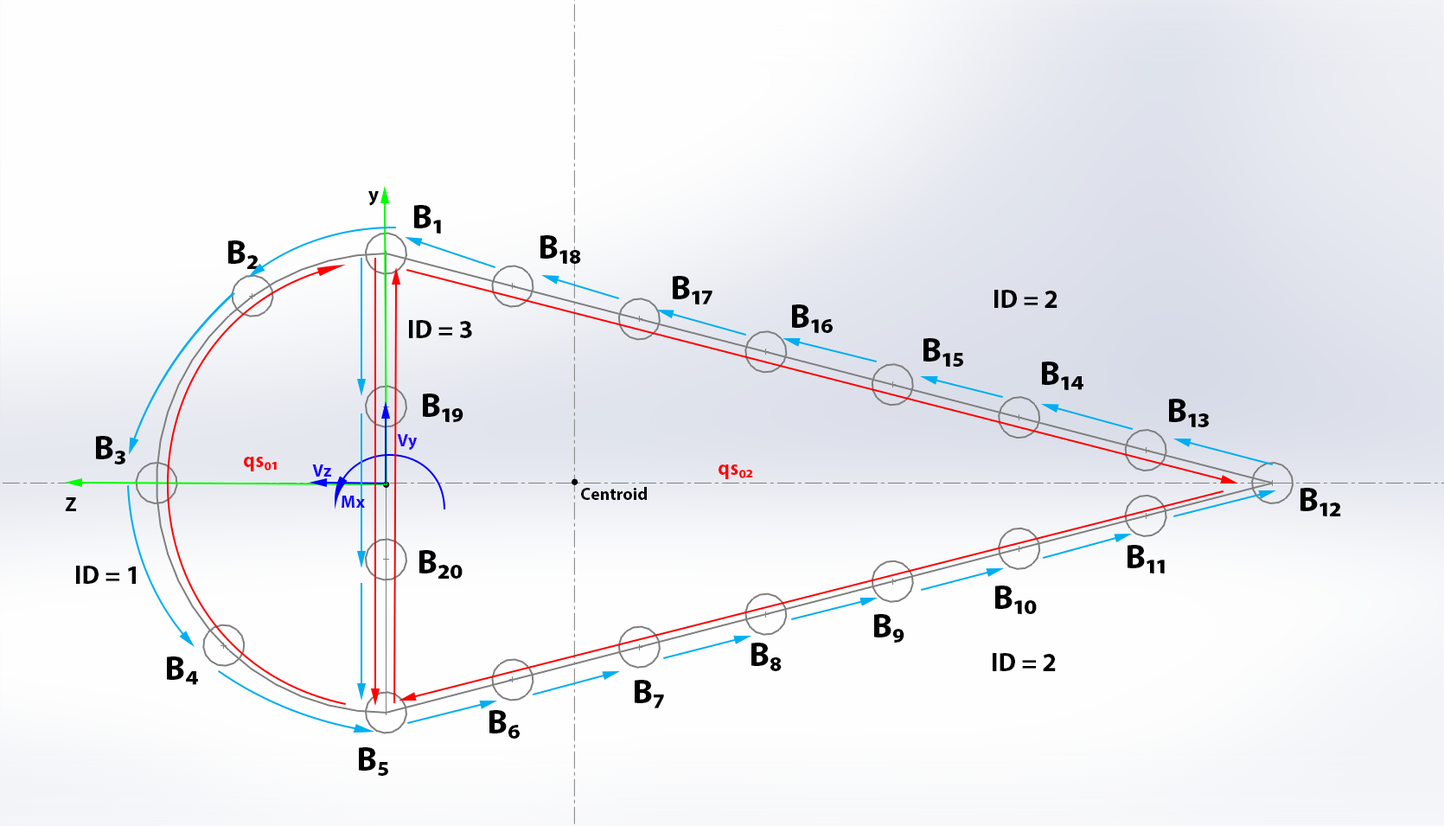
<style>
.page{position:relative;width:1444px;height:826px;background:#fefefe}
.page>*{position:absolute;margin:0}
.t1{font:20.2px "MyriadPro-Bold";color:#000000}
.t2{font:34.6px "MyriadPro-Bold";color:#000000}
.t3{font:25.9px "MyriadPro-Bold";color:#000000}
.t4{font:17.3px "MyriadPro-Bold";color:#2400ff}
.t5{font:20.2px "MyriadPro-Bold";color:#ff0000}
.t6{font:17.3px "MyriadPro-Bold";color:#1200ff}
.t7{font:34.6px "MyriadPro-Bold"}
.t8{font:17.3px "MyriadPro-Bold";color:#000000}
</style>
<div class="page">
<p class="t1" style="left:368px;top:191px;width:11px;height:15px">y</p>
<p class="t2" style="left:414px;top:205px;width:27px;height:28px">B1</p>
<p class="t2" style="left:228px;top:240px;width:31px;height:29px">B2</p>
<p class="t2" style="left:540px;top:235px;width:41px;height:29px">B18</p>
<p class="t2" style="left:673px;top:276px;width:39px;height:28px">B17</p>
<p class="t3" style="left:994px;top:290px;width:64px;height:18px">ID = 2</p>
<p class="t2" style="left:792px;top:304px;width:41px;height:29px">B16</p>
<p class="t3" style="left:409px;top:320px;width:63px;height:18px">ID = 3</p>
<p class="t2" style="left:923px;top:338px;width:40px;height:29px">B15</p>
<p class="t2" style="left:1042px;top:361px;width:41px;height:29px">B14</p>
<p class="t2" style="left:423px;top:393px;width:40px;height:29px">B19</p>
<p class="t2" style="left:1169px;top:399px;width:40px;height:28px">B13</p>
<p class="t2" style="left:96px;top:436px;width:29px;height:28px">B3</p>
<p class="t4" style="left:397px;top:434px;width:21px;height:16px">Vy</p>
<p class="t5" style="left:244px;top:457px;width:33px;height:14px">qs01</p>
<p class="t6" style="left:312px;top:464px;width:19px;height:12px">Vz</p>
<p class="t5" style="left:719px;top:464px;width:34px;height:15px">qs02</p>
<p class="t7" style="left:383px;top:481px;width:7px;height:7px">.</p>
<p class="t2" style="left:572px;top:478px;width:6px;height:7px">.</p>
<p class="t1" style="left:65px;top:497px;width:11px;height:14px">Z</p>
<p class="t6" style="left:342px;top:495px;width:23px;height:13px">Mx</p>
<p class="t8" style="left:581px;top:487px;width:66px;height:13px">Centroid</p>
<p class="t2" style="left:1300px;top:488px;width:41px;height:28px">B12</p>
<p class="t2" style="left:1128px;top:545px;width:37px;height:28px">B11</p>
<p class="t2" style="left:419px;top:550px;width:44px;height:28px">B20</p>
<p class="t3" style="left:76px;top:566px;width:60px;height:18px">ID = 1</p>
<p class="t2" style="left:995px;top:585px;width:42px;height:29px">B10</p>
<p class="t2" style="left:874px;top:614px;width:30px;height:28px">B9</p>
<p class="t2" style="left:751px;top:642px;width:31px;height:29px">B8</p>
<p class="t3" style="left:993px;top:653px;width:63px;height:18px">ID = 2</p>
<p class="t2" style="left:167px;top:656px;width:31px;height:29px">B4</p>
<p class="t2" style="left:635px;top:680px;width:29px;height:28px">B7</p>
<p class="t2" style="left:489px;top:710px;width:31px;height:28px">B6</p>
<p class="t2" style="left:359px;top:747px;width:29px;height:29px">B5</p>
</div>
